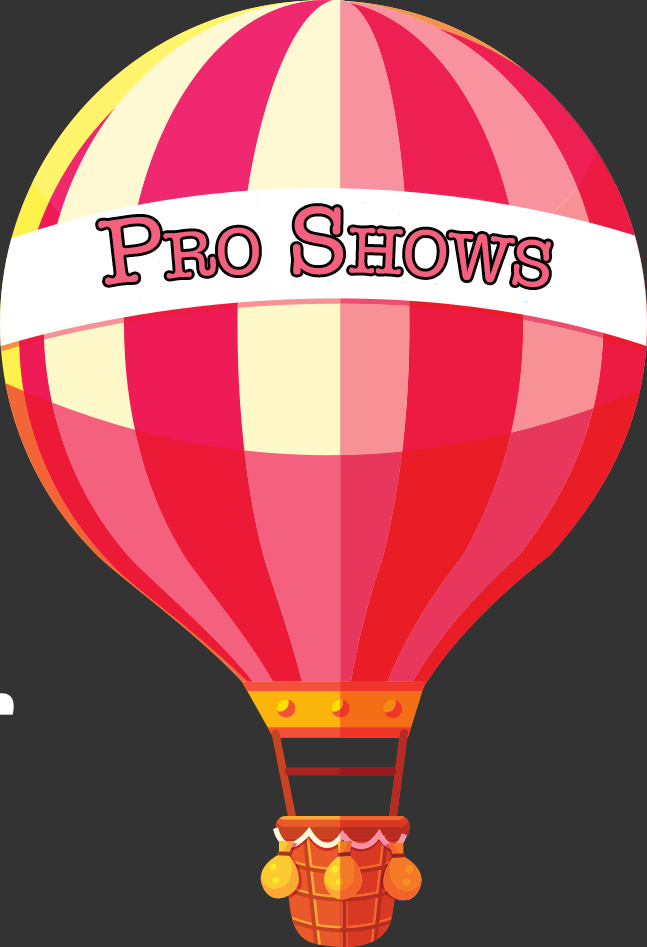
<style>
.page{position:relative;width:647px;height:947px;background:#333333}
.page>*{position:absolute;margin:0}
.t1{font:95.9px "AmericanTypewriter";color:#f3617f;font-variant:small-caps}
</style>
<div class="page">
<p class="t1" style="left:98px;top:206px;width:453px;height:81px">Pro Shows</p>
</div>
